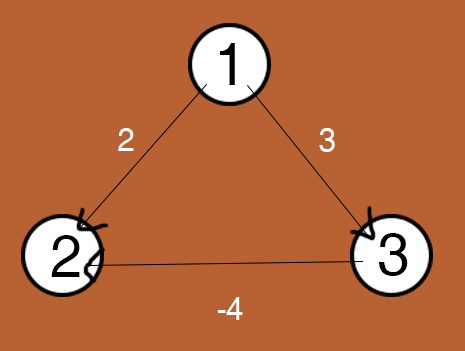
<style>
.page{position:relative;width:465px;height:351px;background:#b86233}
.page>*{position:absolute;margin:0}
.t1{font:59.5px "Helvetica";letter-spacing:-0.02em;color:#000000}
.t2{font:31.5px "Helvetica";letter-spacing:-0.02em;color:#ffffff}
</style>
<div class="page">
<p class="t1" style="left:219px;top:43px;width:16px;height:42px">1</p>
<p class="t2" style="left:118px;top:128px;width:16px;height:23px">2</p>
<p class="t2" style="left:319px;top:128px;width:16px;height:24px">3</p>
<p class="t1" style="left:379px;top:233px;width:29px;height:43px">3</p>
<p class="t1" style="left:51px;top:235px;width:29px;height:42px">2</p>
<p class="t2" style="left:217px;top:297px;width:26px;height:23px">-4</p>
</div>
